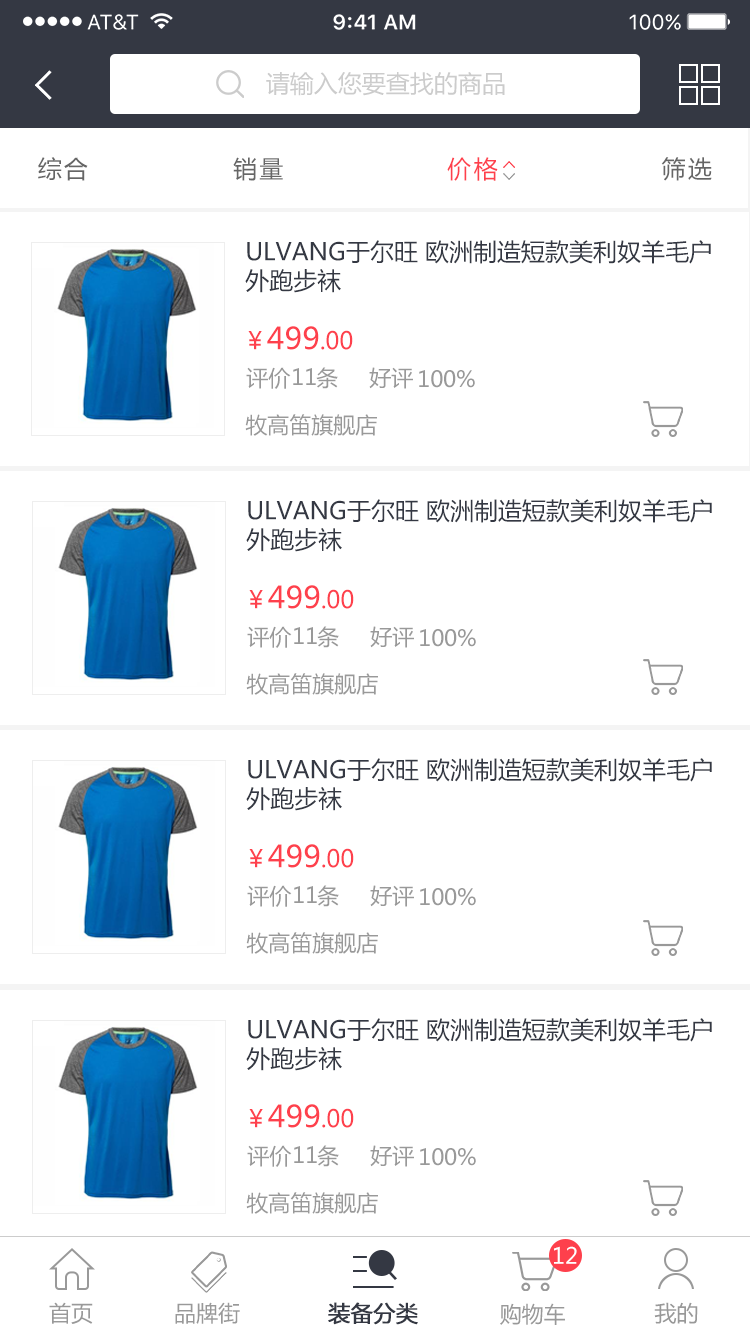
<style>
.page{position:relative;width:750px;height:1334px;background:#ffffff}
.page>*{position:absolute;margin:0}
.t1{font:24px "MicrosoftYaHei";color:#cccccc}
.t2{font:24px "MicrosoftYaHei";letter-spacing:0.1em;color:#666666}
.t3{font:24px "MicrosoftYaHei";letter-spacing:0.1em;color:#fe404c}
.t4{font:24px "MicrosoftYaHei";color:#343843}
.t5{font:30px "MicrosoftYaHei";color:#fe404c}
.t6{font:24px "MicrosoftYaHei";color:#fe404c}
.t7{font:22px "MicrosoftYaHei";color:#999999}
.t8{font:22px "MicrosoftYaHei";color:#ffffff}
.t9{font:22px "MicrosoftYaHei";color:#343843;font-weight:bold}
</style>
<div class="page">
<p class="t1" style="left:266px;top:72px;width:239px;height:24px">请输入您要查找的商品</p>
<p class="t2" style="left:38px;top:157px;width:674px;height:24px">综合               销量                 <span class="t3">价格                 </span>筛选</p>
<p class="t4" style="left:245px;top:240px;width:466px;height:53px">ULVANG于尔旺 欧洲制造短款美利奴羊毛户外跑步袜</p>
<p class="t5" style="left:248px;top:326px;width:105px;height:24px"><span class="t6">￥</span>499<span class="t6">.00</span></p>
<p class="t7" style="left:246px;top:367px;width:92px;height:22px">评价    条</p>
<p class="t7" style="left:293px;top:368px;width:23px;height:17px">11</p>
<p class="t7" style="left:369px;top:367px;width:44px;height:22px">好评</p>
<p class="t7" style="left:419px;top:370px;width:56px;height:18px">100%</p>
<p class="t7" style="left:245px;top:414px;width:132px;height:22px">牧高笛旗舰店</p>
<p class="t4" style="left:246px;top:499px;width:466px;height:53px">ULVANG于尔旺 欧洲制造短款美利奴羊毛户外跑步袜</p>
<p class="t5" style="left:249px;top:585px;width:105px;height:24px"><span class="t6">￥</span>499<span class="t6">.00</span></p>
<p class="t7" style="left:247px;top:626px;width:92px;height:22px">评价    条</p>
<p class="t7" style="left:294px;top:627px;width:23px;height:17px">11</p>
<p class="t7" style="left:370px;top:626px;width:44px;height:22px">好评</p>
<p class="t7" style="left:420px;top:629px;width:56px;height:18px">100%</p>
<p class="t7" style="left:246px;top:673px;width:132px;height:22px">牧高笛旗舰店</p>
<p class="t4" style="left:246px;top:758px;width:466px;height:53px">ULVANG于尔旺 欧洲制造短款美利奴羊毛户外跑步袜</p>
<p class="t5" style="left:249px;top:844px;width:105px;height:24px"><span class="t6">￥</span>499<span class="t6">.00</span></p>
<p class="t7" style="left:247px;top:885px;width:92px;height:22px">评价    条</p>
<p class="t7" style="left:294px;top:886px;width:23px;height:17px">11</p>
<p class="t7" style="left:370px;top:885px;width:44px;height:22px">好评</p>
<p class="t7" style="left:420px;top:888px;width:56px;height:18px">100%</p>
<p class="t7" style="left:246px;top:932px;width:132px;height:22px">牧高笛旗舰店</p>
<p class="t4" style="left:246px;top:1018px;width:466px;height:53px">ULVANG于尔旺 欧洲制造短款美利奴羊毛户外跑步袜</p>
<p class="t5" style="left:249px;top:1104px;width:105px;height:24px"><span class="t6">￥</span>499<span class="t6">.00</span></p>
<p class="t7" style="left:247px;top:1145px;width:92px;height:22px">评价    条</p>
<p class="t7" style="left:370px;top:1145px;width:44px;height:22px">好评</p>
<p class="t7" style="left:294px;top:1146px;width:23px;height:17px">11</p>
<p class="t7" style="left:420px;top:1148px;width:56px;height:18px">100%</p>
<p class="t7" style="left:246px;top:1192px;width:132px;height:22px">牧高笛旗舰店</p>
<p class="t8" style="left:554px;top:1246px;width:23px;height:18px">12</p>
<p class="t7" style="left:49px;top:1302px;width:44px;height:22px">首页</p>
<p class="t7" style="left:175px;top:1302px;width:65px;height:22px">品牌街</p>
<p class="t9" style="left:328px;top:1302px;width:90px;height:23px">装备分类</p>
<p class="t7" style="left:654px;top:1302px;width:44px;height:22px">我的</p>
<p class="t7" style="left:500px;top:1303px;width:65px;height:22px">购物车</p>
</div>
